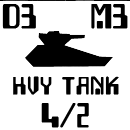
<style>
.page{position:relative;width:130px;height:130px;background:#ffffff}
.page>*{position:absolute;margin:0}
.t1{font:29.2px "Checkbook";color:#000000;font-weight:bold}
.t2{font:20.8px "Checkbook";letter-spacing:0.06em;color:#000000;font-weight:bold}
</style>
<div class="page">
<p class="t1" style="left:2px;top:3px;width:34px;height:25px">D3</p>
<p class="t1" style="left:91px;top:3px;width:37px;height:25px">M3</p>
<p class="t2" style="left:13px;top:75px;width:106px;height:19px">HVY TANK</p>
<p class="t1" style="left:41px;top:102px;width:48px;height:25px">4/2</p>
</div>
